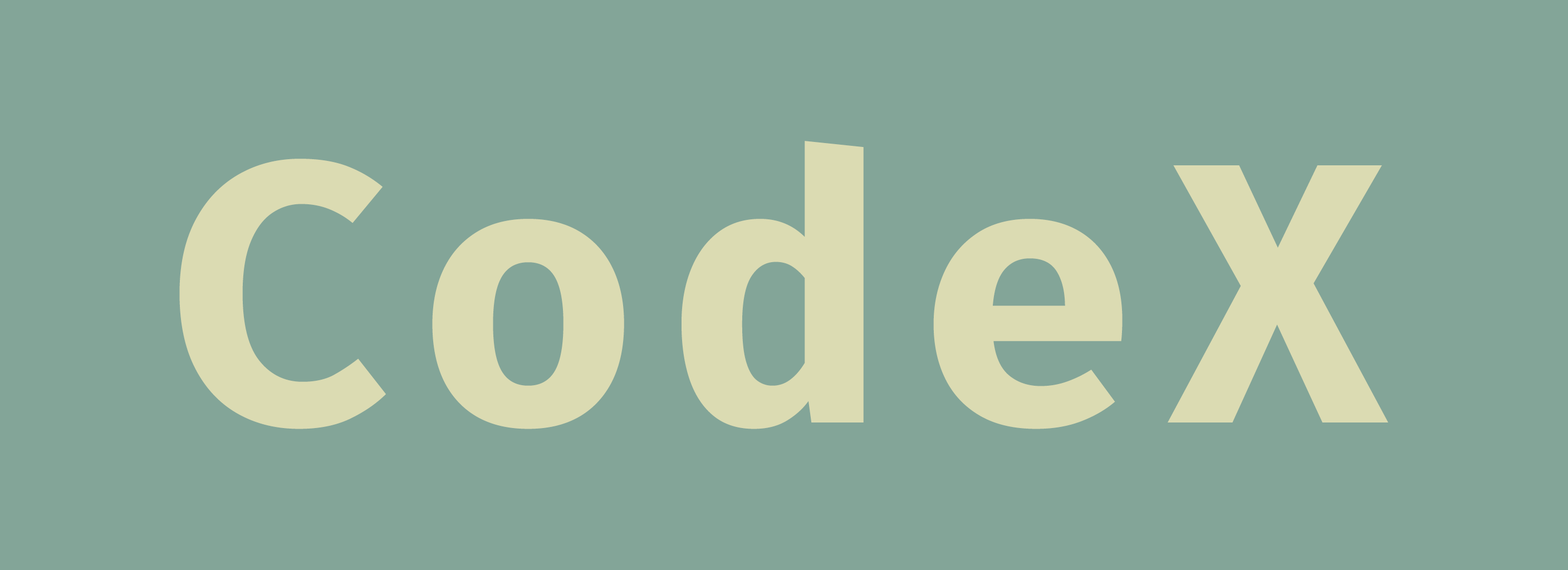
<style>
.page{position:relative;width:1568px;height:570px;background:#83a598}
.page>*{position:absolute;margin:0}
.t1{font:361.9px "FiraCode-Bold";letter-spacing:0.075em;color:#dbdbb2}
</style>
<div class="page">
<p class="t1" style="left:179px;top:141px;width:1209px;height:288px">CodeX</p>
</div>
